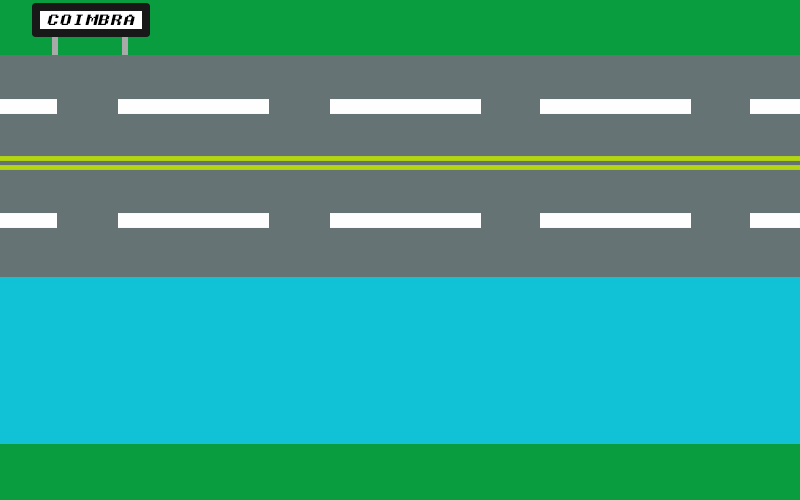
<style>
.page{position:relative;width:800px;height:500px;background:#667375}
.page>*{position:absolute;margin:0}
.t1{font:15px "Fixedsys";color:#000000;font-style:italic;scale:1.36 1}
</style>
<div class="page">
<p class="t1" style="left:47px;top:14px;width:88px;height:11px">COIMBRA</p>
</div>
